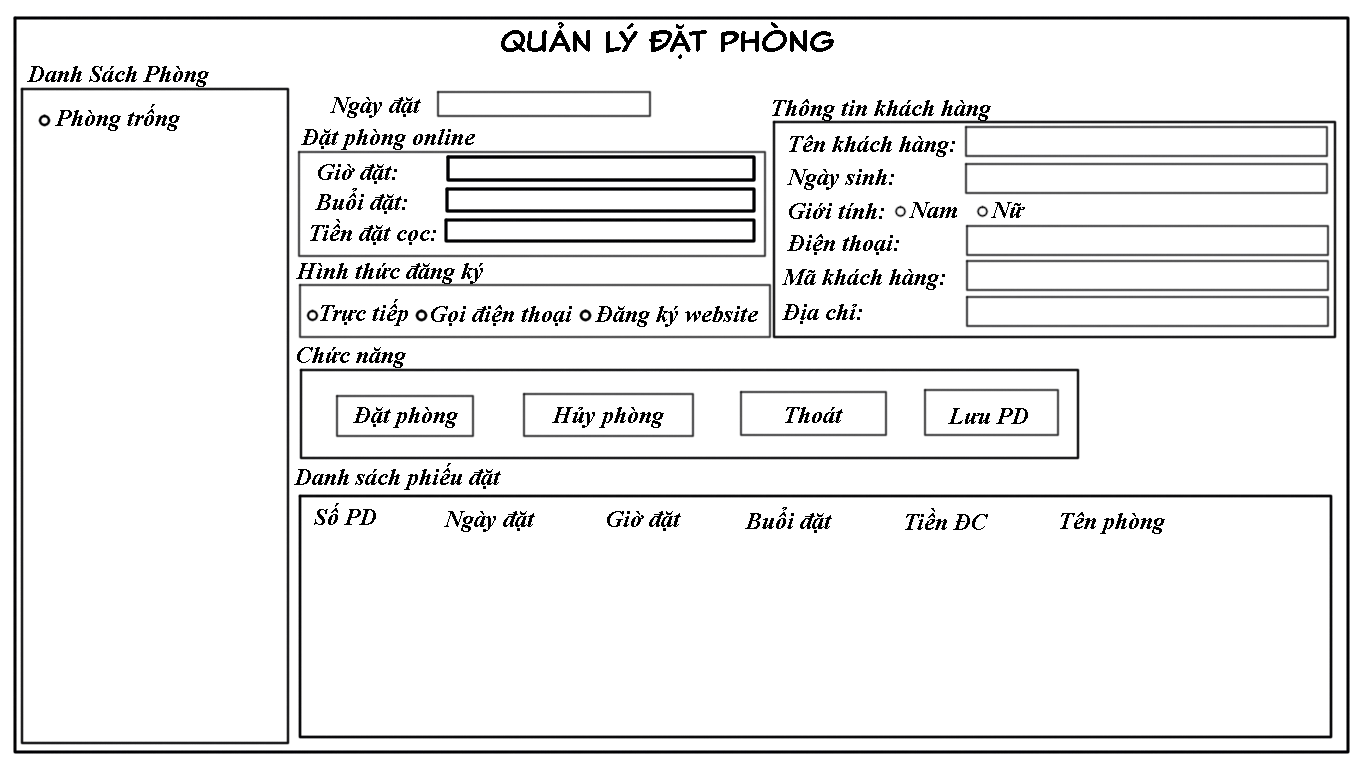
<style>
.page{position:relative;width:1366px;height:768px;background:#ffffff}
.page>*{position:absolute;margin:0}
.t1{font:30px "000ClassicComicTB-Normal";color:#000000}
.t2{font:24px "TimesNewRomanPS-BoldItalicMT";color:#000000}
</style>
<div class="page">
<p class="t1" style="left:501px;top:22px;width:333px;height:37px">Quản Lý Đặt phòng</p>
<p class="t2" style="left:27px;top:66px;width:182px;height:21px">Danh Sách Phòng</p>
<p class="t2" style="left:330px;top:97px;width:91px;height:21px">Ngày đặt</p>
<p class="t2" style="left:772px;top:99px;width:219px;height:22px">Thông tin khách hàng</p>
<p class="t2" style="left:55px;top:104px;width:125px;height:27px">Phòng trống</p>
<p class="t2" style="left:301px;top:129px;width:174px;height:21px">Đặt phòng online</p>
<p class="t2" style="left:789px;top:135px;width:166px;height:22px">Tên khách hàng:</p>
<p class="t2" style="left:318px;top:164px;width:79px;height:20px">Giờ đặt:</p>
<p class="t2" style="left:787px;top:169px;width:107px;height:21px">Ngày sinh:</p>
<p class="t2" style="left:315px;top:188px;width:92px;height:26px">Buổi đặt:</p>
<p class="t2" style="left:789px;top:203px;width:95px;height:16px">Giới tính:</p>
<p class="t2" style="left:909px;top:202px;width:48px;height:16px">Nam</p>
<p class="t2" style="left:991px;top:202px;width:34px;height:16px">Nữ</p>
<p class="t2" style="left:310px;top:219px;width:126px;height:26px">Tiền đặt cọc:</p>
<p class="t2" style="left:787px;top:234px;width:112px;height:21px">Điện thoại:</p>
<p class="t2" style="left:296px;top:263px;width:187px;height:21px">Hình thức đăng ký</p>
<p class="t2" style="left:782px;top:269px;width:163px;height:21px">Mã khách hàng:</p>
<p class="t2" style="left:320px;top:299px;width:88px;height:27px">Trực tiếp</p>
<p class="t2" style="left:431px;top:305px;width:141px;height:21px">Gọi điện thoại</p>
<p class="t2" style="left:782px;top:304px;width:80px;height:20px">Địa chỉ:</p>
<p class="t2" style="left:595px;top:306px;width:163px;height:21px">Đăng ký website</p>
<p class="t2" style="left:297px;top:347px;width:109px;height:21px">Chức năng</p>
<p class="t2" style="left:353px;top:407px;width:105px;height:21px">Đặt phòng</p>
<p class="t2" style="left:552px;top:407px;width:112px;height:21px">Hủy phòng</p>
<p class="t2" style="left:785px;top:407px;width:58px;height:16px">Thoát</p>
<p class="t2" style="left:948px;top:408px;width:80px;height:16px">Lưu PD</p>
<p class="t2" style="left:294px;top:463px;width:207px;height:27px">Danh sách phiếu đặt</p>
<p class="t2" style="left:314px;top:503px;width:62px;height:22px">Số PD</p>
<p class="t2" style="left:745px;top:507px;width:87px;height:26px">Buổi đặt</p>
<p class="t2" style="left:905px;top:508px;width:83px;height:22px">Tiền ĐC</p>
<p class="t2" style="left:444px;top:511px;width:91px;height:21px">Ngày đặt</p>
<p class="t2" style="left:607px;top:511px;width:74px;height:20px">Giờ đặt</p>
<p class="t2" style="left:1060px;top:512px;width:105px;height:22px">Tên phòng</p>
</div>
